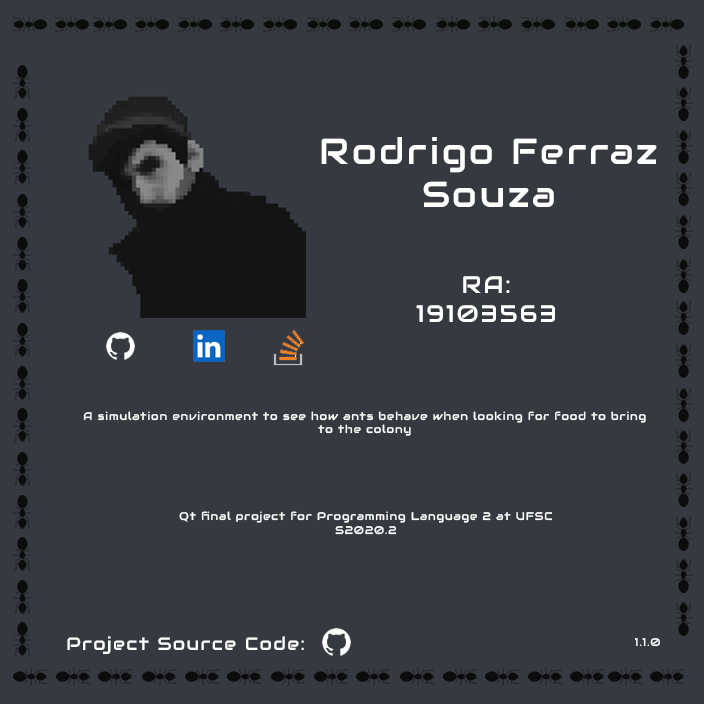
<style>
.page{position:relative;width:704px;height:704px;background:#36393f}
.page>*{position:absolute;margin:0}
.t1{font:36px "Audiowide-Regular";letter-spacing:0.08em;color:#ffffff}
.t2{font:24px "Audiowide-Regular";letter-spacing:0.08em;color:#ffffff}
.t3{font:11px "Audiowide-Regular";letter-spacing:0.08em;color:#ffffff}
.t4{font:18px "Audiowide-Regular";letter-spacing:0.08em;color:#ffffff}
</style>
<div class="page">
<p class="t1" style="left:321px;top:137px;width:336px;height:70px;text-align:center">Rodrigo Ferraz<br>Souza</p>
<p class="t2" style="left:416px;top:276px;width:139px;height:46px;text-align:center">RA:<br>19103563</p>
<p class="t3" style="left:83px;top:411px;width:563px;height:25px;text-align:center">A simulation environment to see how ants behave when looking for food to bring<br>to the colony</p>
<p class="t3" style="left:179px;top:511px;width:374px;height:24px;text-align:center">Qt final project for Programming Language 2 at UFSC<br>S2020.2</p>
<p class="t4" style="left:67px;top:636px;width:237px;height:18px">Project Source Code:</p>
<p class="t3" style="left:635px;top:638px;width:25px;height:9px">1.1.0</p>
</div>
